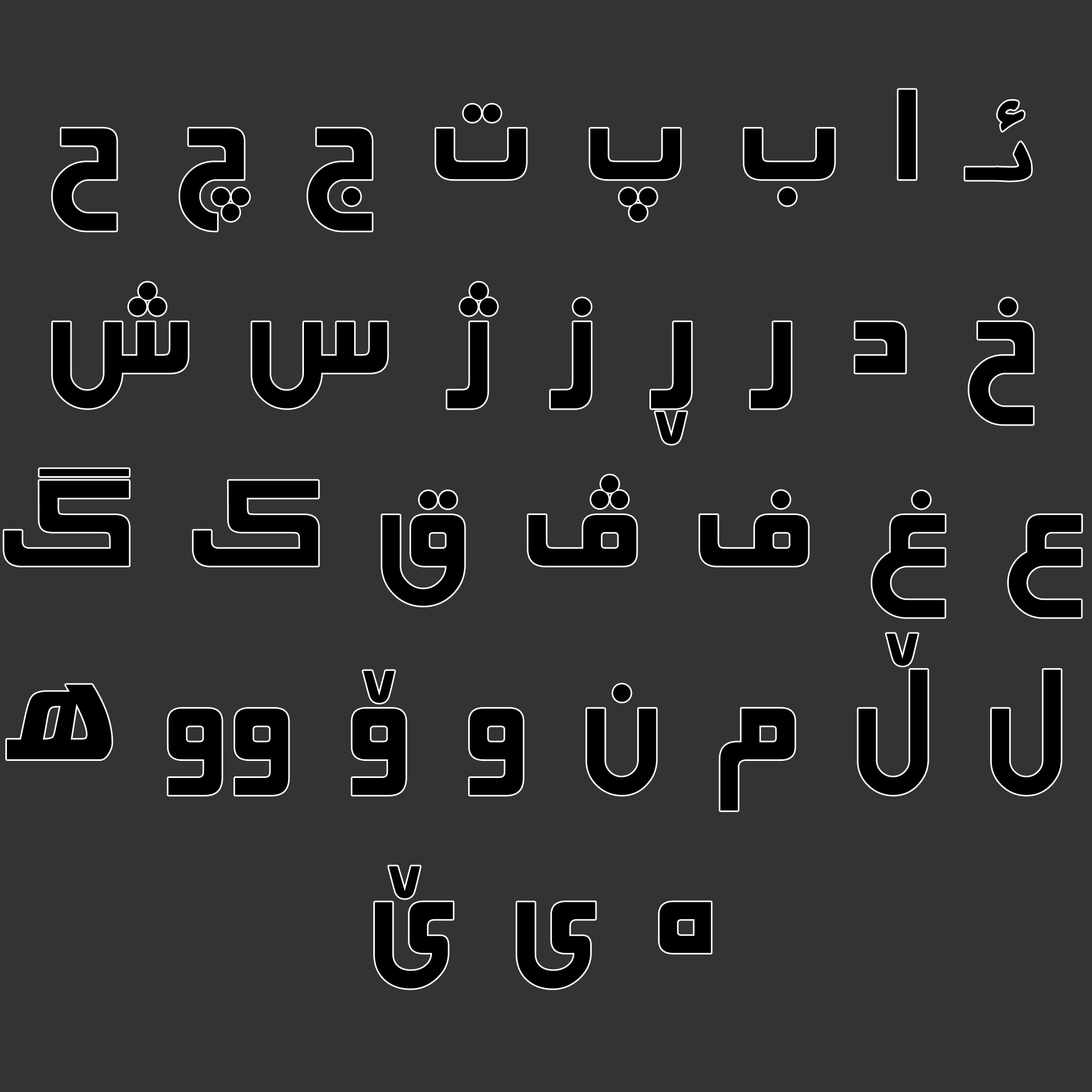
<style>
.page{position:relative;width:1092px;height:1092px;background:#333333}
.page>*{position:absolute;margin:0}
.t1{font:161.1px "Unikursy";color:#000000}
.t2{font:161.1px "Unikuxan";color:#000000}
.t3{font:161.1px "Unikurry";color:#000000}
</style>
<div class="page">
<p class="t1" style="left:4px;top:90px;width:1077px;height:899px;text-align:center"><span class="t2">ئـ</span> ا ب پ ت ج چ ح خ د ر ڕ ز ژ س ش ع غ ف ڤ ق ک گ ل ڵ م ن و ۆ وو <span class="t3">ھ</span> ە ی ێ</p>
</div>
